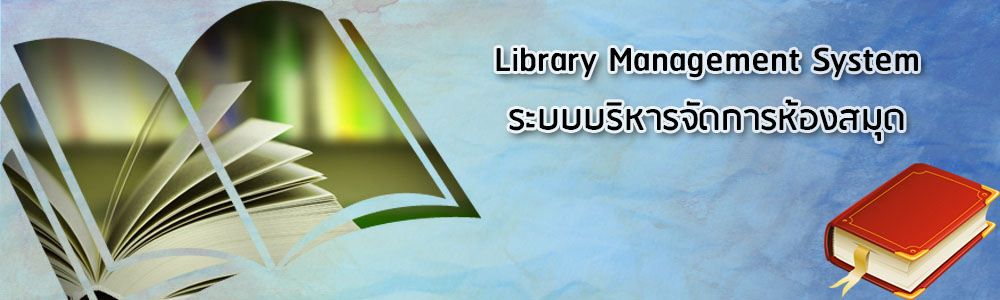
<style>
.page{position:relative;width:1000px;height:300px}
.page>*{position:absolute;margin:0}
.t1{font:41.7px/58.3px "RSU-Bold";color:#000000}
</style>
<div class="page">
<p class="t1" style="left:496px;top:47px;width:422px;height:94px;text-align:center">Library Management System<br>ระบบบริหารจัดการห้องสมุด</p>
</div>
